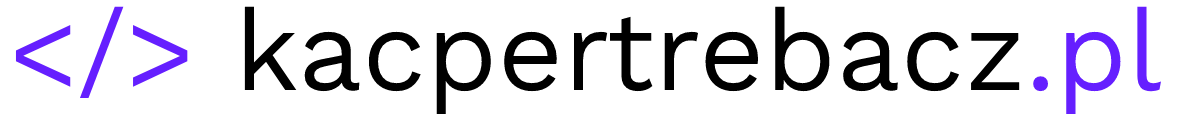
<style>
.page{position:relative;width:1183px;height:125px;background:#ffffff}
.page>*{position:absolute;margin:0}
.t1{font:114px "WorkSans-Regular";color:#000000}
.t2{font:114px "WorkSans-Regular";color:#651fff}
</style>
<div class="page">
<p class="t1" style="left:15px;top:6px;width:1146px;height:108px"><span class="t2">&lt;/&gt; </span>kacpertrebacz<span class="t2">.pl</span></p>
</div>
